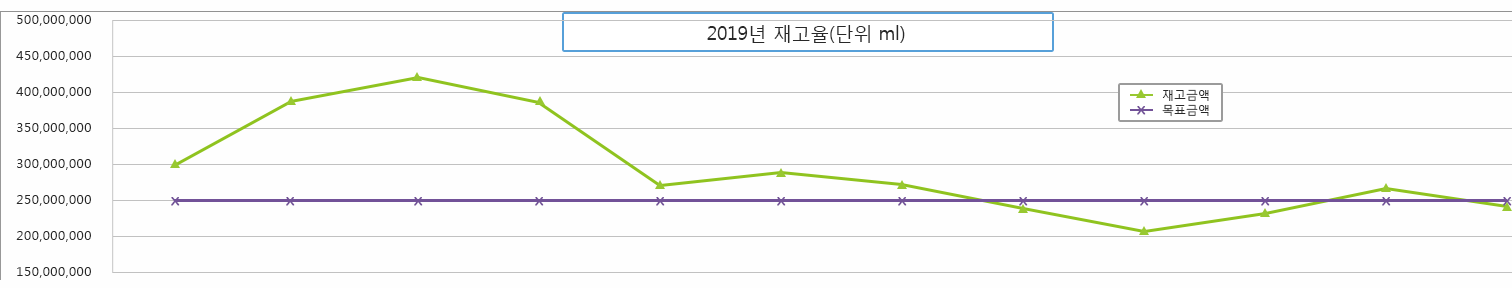
<style>
.page{position:relative;width:1512px;height:288px;background:#fefefe}
.page>*{position:absolute;margin:0}
.t1{font:13.3px/36px "MalgunGothicRegular";letter-spacing:0.025em;color:#282828}
.t2{font:18.7px "MalgunGothicRegular";color:#282828}
.t3{font:12px "MalgunGothicRegular";color:#282828}
.t4{font:14.7px "Gulim";letter-spacing:-0.05em;color:#725298;font-weight:bold;scale:1.2 1}
</style>
<div class="page">
<p class="t1" style="left:16px;top:15px;width:75px;height:263px;text-align:center">500,000,000<br>450,000,000<br>400,000,000<br>350,000,000<br>300,000,000<br>250,000,000<br>200,000,000<br>150,000,000</p>
<p class="t2" style="left:707px;top:25px;width:198px;height:18px">2019년 재고율(단위 ml)</p>
<p class="t3" style="left:1162px;top:89px;width:47px;height:12px">재고금액</p>
<p class="t4" style="left:1137px;top:106px;width:9px;height:9px">x</p>
<p class="t3" style="left:1162px;top:104px;width:47px;height:13px">목표금액</p>
<p class="t4" style="left:171px;top:197px;width:9px;height:9px">x</p>
<p class="t4" style="left:286px;top:197px;width:9px;height:9px">x</p>
<p class="t4" style="left:414px;top:197px;width:9px;height:9px">x</p>
<p class="t4" style="left:535px;top:197px;width:9px;height:9px">x</p>
<p class="t4" style="left:656px;top:197px;width:9px;height:9px">x</p>
<p class="t4" style="left:777px;top:197px;width:9px;height:9px">x</p>
<p class="t4" style="left:898px;top:197px;width:9px;height:9px">x</p>
<p class="t4" style="left:1019px;top:197px;width:9px;height:9px">x</p>
<p class="t4" style="left:1140px;top:197px;width:9px;height:9px">x</p>
<p class="t4" style="left:1261px;top:197px;width:9px;height:9px">x</p>
<p class="t4" style="left:1382px;top:197px;width:9px;height:9px">x</p>
<p class="t4" style="left:1503px;top:197px;width:9px;height:9px">x</p>
</div>
